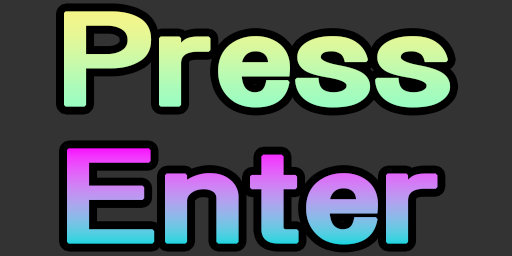
<style>
.page{position:relative;width:512px;height:256px;background:#333333}
.page>*{position:absolute;margin:0}
.t1{font:114.7px "HGPGothicE";letter-spacing:-0.07em;font-weight:bold;scale:1.6 1}
</style>
<div class="page">
<p class="t1" style="left:64px;top:11px;width:387px;height:97px">Press</p>
<p class="t1" style="left:67px;top:148px;width:371px;height:97px">Enter</p>
</div>
